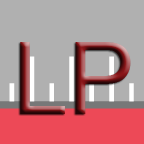
<style>
.page{position:relative;width:144px;height:144px;background:#b0b0b0}
.page>*{position:absolute;margin:0}
.t1{font:100px "ArialMT"}
</style>
<div class="page">
<p class="t1" style="left:20px;top:42px;width:111px;height:72px">LP</p>
</div>
